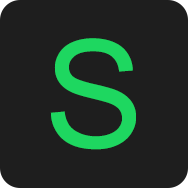
<style>
.page{position:relative;width:188px;height:188px;background:#1e1e1e}
.page>*{position:absolute;margin:0}
.t1{font:149.6px "ArialMT";color:#1ed760}
</style>
<div class="page">
<p class="t1" style="left:50px;top:38px;width:86px;height:112px">S</p>
</div>
